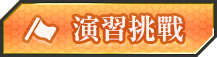
<style>
.page{position:relative;width:217px;height:57px}
.page>*{position:absolute;margin:0}
.t1{font:28px "RyuminPr6N-ExBold";color:#fef2ee}
</style>
<div class="page">
<p class="t1" style="left:73px;top:15px;width:111px;height:27px">演習挑戰</p>
</div>
